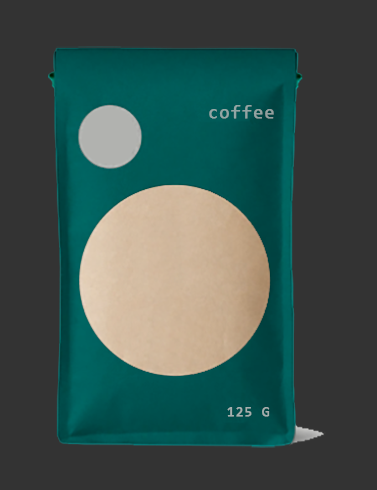
<style>
.page{position:relative;width:377px;height:490px;background:#333333}
.page>*{position:absolute;margin:0}
.t1{font:18px "Consolas";letter-spacing:0.05em;color:#92a5a4;font-weight:bold}
.t2{font:14px "Consolas";letter-spacing:0.05em;color:#a4afae;font-weight:bold}
</style>
<div class="page">
<p class="t1" style="left:209px;top:105px;width:65px;height:14px">coffee</p>
<p class="t2" style="left:227px;top:407px;width:43px;height:10px">125 G</p>
</div>
